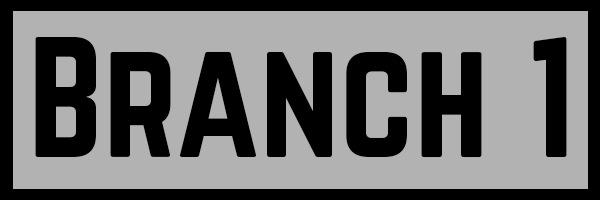
<style>
.page{position:relative;width:600px;height:200px;background:#b2b2b2}
.page>*{position:absolute;margin:0}
.t1{font:150px "Norwester-Regular";color:#000000}
</style>
<div class="page">
<p class="t1" style="left:35px;top:37px;width:532px;height:121px">Branch 1</p>
</div>
